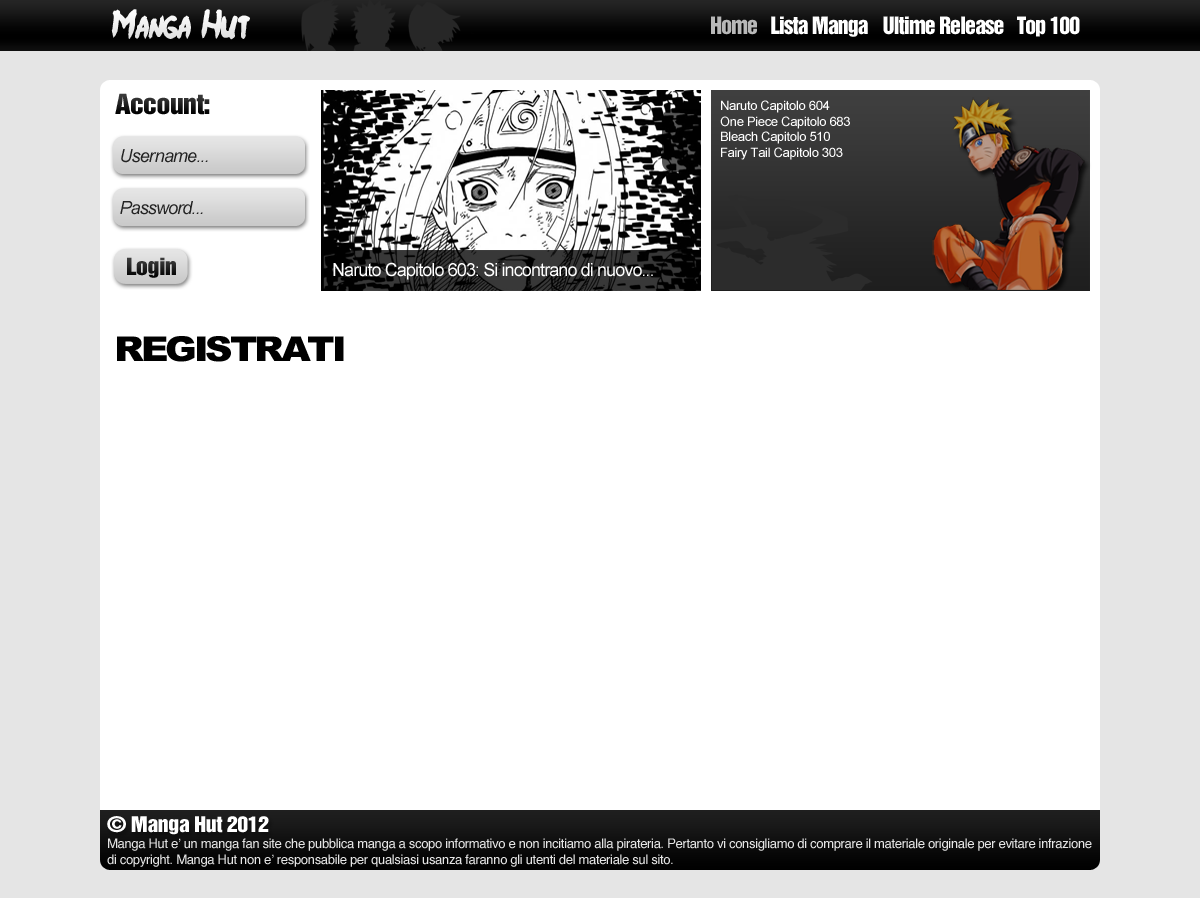
<style>
.page{position:relative;width:1200px;height:898px;background:#ffffff}
.page>*{position:absolute;margin:0}
.t1{font:26px "Ninja-Naruto";letter-spacing:-0.05em;color:#ffffff}
.t2{font:33px "Ninja-Naruto";letter-spacing:-0.05em;color:#ffffff}
.t3{font:22px "HelveticaInseratLTStd-Roman";letter-spacing:-0.05em;color:#ffffff}
.t4{font:22px "HelveticaInseratLTStd-Roman";letter-spacing:-0.05em;color:#b8b8b8}
.t5{font:25.2px "HelveticaInseratLTStd-Roman";letter-spacing:-0.025em;color:#1a1a1a;scale:1.11 1}
.t6{font:13px "ArialMT";letter-spacing:-0.025em;color:#ffffff}
.t7{font:18px "Arial-ItalicMT";letter-spacing:-0.05em;color:#232323}
.t8{font:18px "Arial-ItalicMT";color:#232323}
.t9{font:21.6px "HelveticaInseratLTStd-Roman";letter-spacing:-0.025em;color:#1d1d1d;scale:1.11 1}
.t10{font:18px "ArialMT";letter-spacing:-0.05em;color:#ffffff}
.t11{font:34.2px "Arial-Black";letter-spacing:-0.08em;color:#000000;scale:1.11 1}
.t12{font:19.8px "HelveticaInseratLTStd-Roman";letter-spacing:-0.025em;color:#ffffff;scale:1.11 1}
.t13{font:13px "Helvetica";letter-spacing:-0.025em;color:#e5e5e5}
</style>
<div class="page">
<p class="t1" style="left:111px;top:9px;width:139px;height:31px"><span class="t2">M</span>anga   <span class="t2">H</span>ut</p>
<p class="t3" style="left:711px;top:16px;width:369px;height:21px"><span class="t4">Home</span>   Lista Manga   Ultime Release   Top 100</p>
<p class="t5" style="left:115px;top:93px;width:95px;height:22px">Account:</p>
<p class="t6" style="left:720px;top:100px;width:130px;height:60px">Naruto Capitolo 604<br>One Piece Capitolo 683<br>Bleach Capitolo 510<br>Fairy Tail Capitolo 303</p>
<p class="t7" style="left:121px;top:149px;width:87px;height:14px">Use<span class="t8">r</span>name...</p>
<p class="t7" style="left:120px;top:201px;width:83px;height:14px">Password...</p>
<p class="t9" style="left:127px;top:257px;width:49px;height:21px">Login</p>
<p class="t10" style="left:333px;top:262px;width:320px;height:18px">Naruto Capitolo 603: Si incontrano di nuovo...</p>
<p class="t11" style="left:117px;top:336px;width:227px;height:26px">REGISTRATI</p>
<p class="t12" style="left:107px;top:816px;width:162px;height:19px">© Manga Hut 2012</p>
<p class="t13" style="left:107px;top:838px;width:985px;height:29px">Manga Hut e’ un manga fan site che pubblica manga a scopo informativo e non incitiamo alla pirateria. Pertanto vi consigliamo di comprare il materiale originale per evitare infrazione<br>di copyright. Manga Hut non e’ responsabile per qualsiasi usanza faranno gli utenti del materiale sul sito.</p>
</div>
